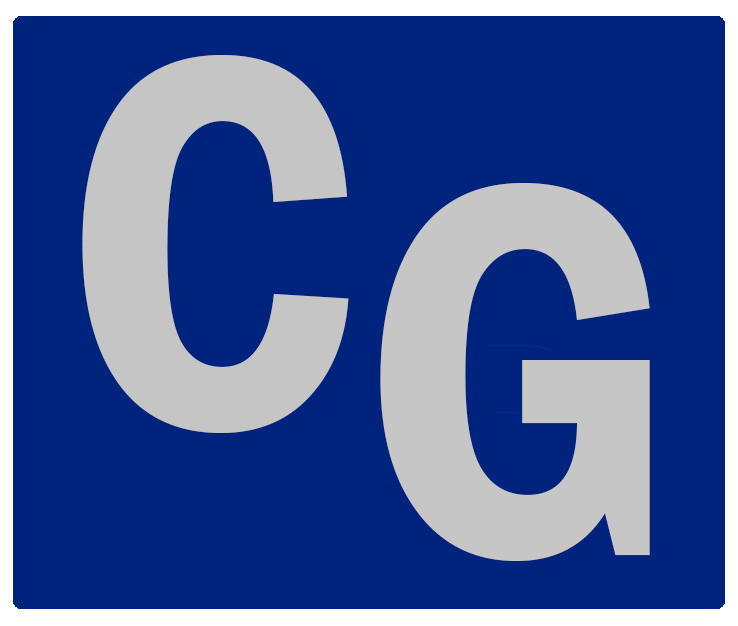
<style>
.page{position:relative;width:738px;height:626px;background:#00237d}
.page>*{position:absolute;margin:0}
.t1{font:550px "FranklinGothic-DemiCond";letter-spacing:-0.32em;color:#c5c5c5}
.t2{font:550px "FranklinGothic-DemiCond";letter-spacing:-0.32em;color:#c6c6c6}
</style>
<div class="page">
<p class="t1" style="left:82px;top:55px;width:267px;height:378px">C</p>
<p class="t2" style="left:380px;top:183px;width:270px;height:378px">G</p>
</div>
